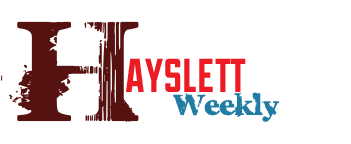
<style>
.page{position:relative;width:351px;height:144px;background:#ffffff}
.page>*{position:absolute;margin:0}
.t1{font:250px "CharlesS.";color:#561210}
.t2{font:58.3px "Duke-Fill";color:#ed1c24}
.t3{font:50px "CharlesS.";color:#217ca3}
</style>
<div class="page">
<p class="t1" style="left:1px;top:21px;width:138px;height:101px">H</p>
<p class="t2" style="left:126px;top:58px;width:120px;height:34px">ayslett</p>
<p class="t3" style="left:172px;top:92px;width:108px;height:30px">Weekly</p>
</div>
